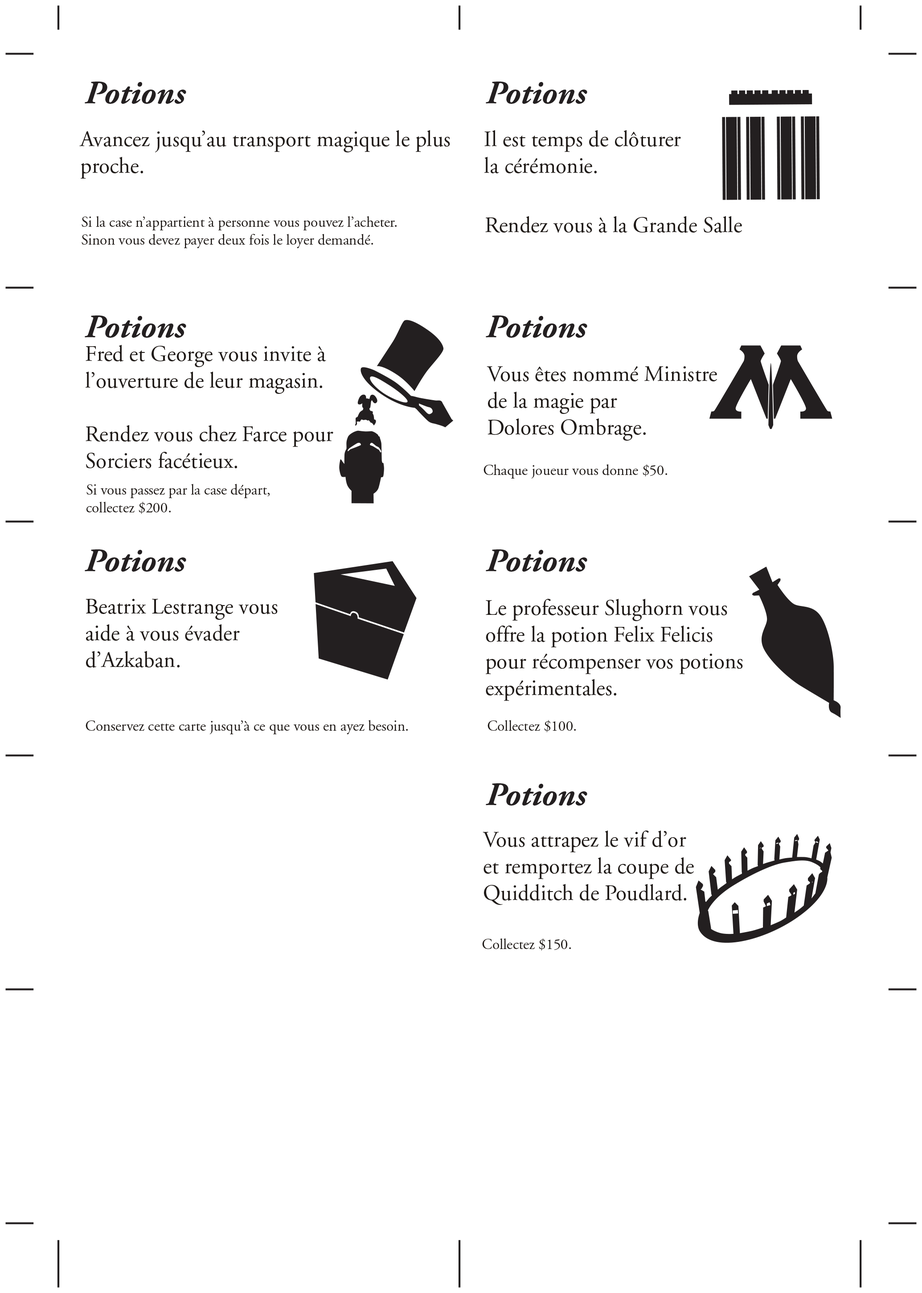
<style>
.page{position:relative;width:922px;height:1293px;background:#ffffff}
.page>*{position:absolute;margin:0}
.t1{font:5.3px "AGaramond-Regular";color:#1f1a17}
.t2{font:14.9px "AGaramond-Regular";color:#1f1a17}
.t3{font:22.3px "AGaramond-Regular";color:#1f1a17}
</style>
<div class="page">
<p class="t1" style="left:79px;top:130px;width:371px;height:49px">Avancez jusqu’au transport magique le plus<br>proche.</p>
<p class="t1" style="left:484px;top:130px;width:197px;height:43px">Il est temps de clôturer<br>la cérémonie.</p>
<p class="t2" style="left:82px;top:216px;width:315px;height:32px">Si la case n’appartient à personne vous pouvez l’acheter.<br>Sinon vous devez payer deux fois le loyer demandé.</p>
<p class="t3" style="left:485px;top:216px;width:257px;height:17px">Rendez vous à la Grande Salle</p>
<p class="t1" style="left:86px;top:345px;width:247px;height:124px">Fred et George vous invite à<br>l’ouverture de leur magasin.<br><br>Rendez vous chez Farce pour<br>Sorciers facétieux.</p>
<p class="t1" style="left:487px;top:366px;width:230px;height:75px">Vous êtes nommé Ministre<br>de la magie par<br>Dolores Ombrage.</p>
<p class="t2" style="left:484px;top:464px;width:183px;height:15px">Chaque joueur vous donne $50.</p>
<p class="t2" style="left:86px;top:484px;width:184px;height:30px">Si vous passez par la case départ,<br>collectez $200.</p>
<p class="t1" style="left:86px;top:599px;width:192px;height:69px">Beatrix Lestrange vous<br>aide à vous évader<br>d’Azkaban.</p>
<p class="t3" style="left:486px;top:599px;width:257px;height:102px">Le professeur Slughorn vous<br>offre la potion Felix Felicis<br>pour récompenser vos potions<br>expérimentales.</p>
<p class="t2" style="left:86px;top:720px;width:322px;height:14px">Conservez cette carte jusqu’à ce que vous en ayez besoin.</p>
<p class="t2" style="left:488px;top:720px;width:88px;height:13px">Collectez $100.</p>
<p class="t3" style="left:483px;top:831px;width:211px;height:74px">Vous attrapez le vif d’or<br>et remportez la coupe de<br>Quidditch de Poudlard.</p>
<p class="t2" style="left:482px;top:939px;width:89px;height:12px">Collectez $150.</p>
</div>
